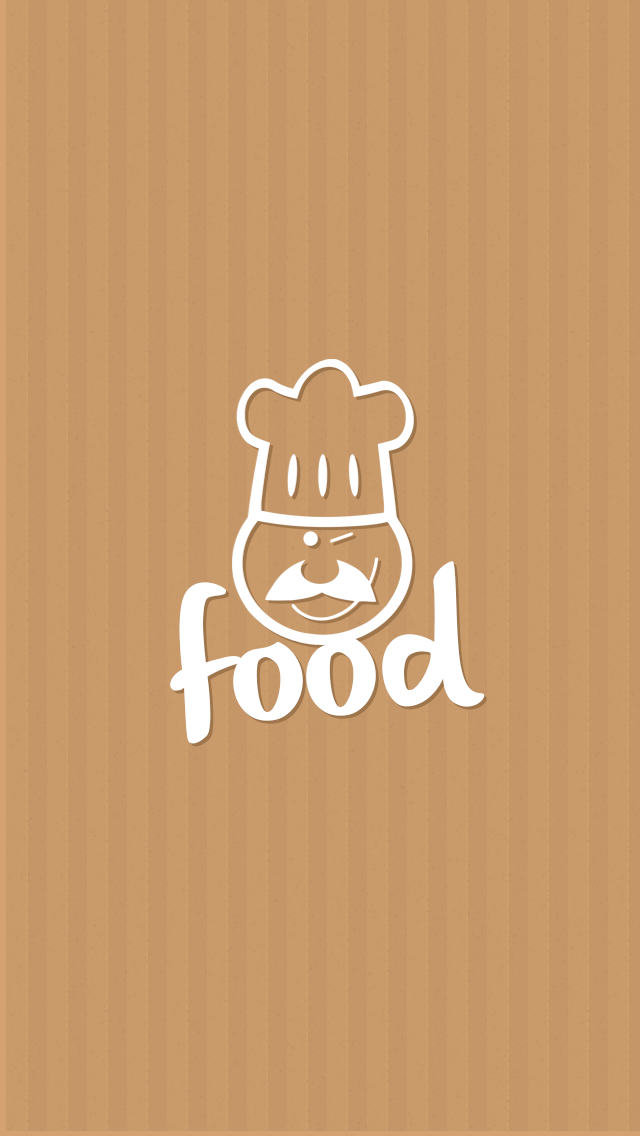
<style>
.page{position:relative;width:640px;height:1136px;background:#c99a6a}
.page>*{position:absolute;margin:0}
.t1{font:191px "olivier";color:#ffffff}
</style>
<div class="page">
<p class="t1" style="left:170px;top:561px;width:315px;height:183px;rotate:-4deg">food</p>
</div>
